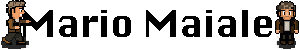
<style>
.page{position:relative;width:300px;height:50px;background:#ffffff}
.page>*{position:absolute;margin:0}
.t1{font:36px "Silom";color:#000000}
</style>
<div class="page">
<p class="t1" style="left:23px;top:10px;width:249px;height:27px">Mario Maiale</p>
</div>
